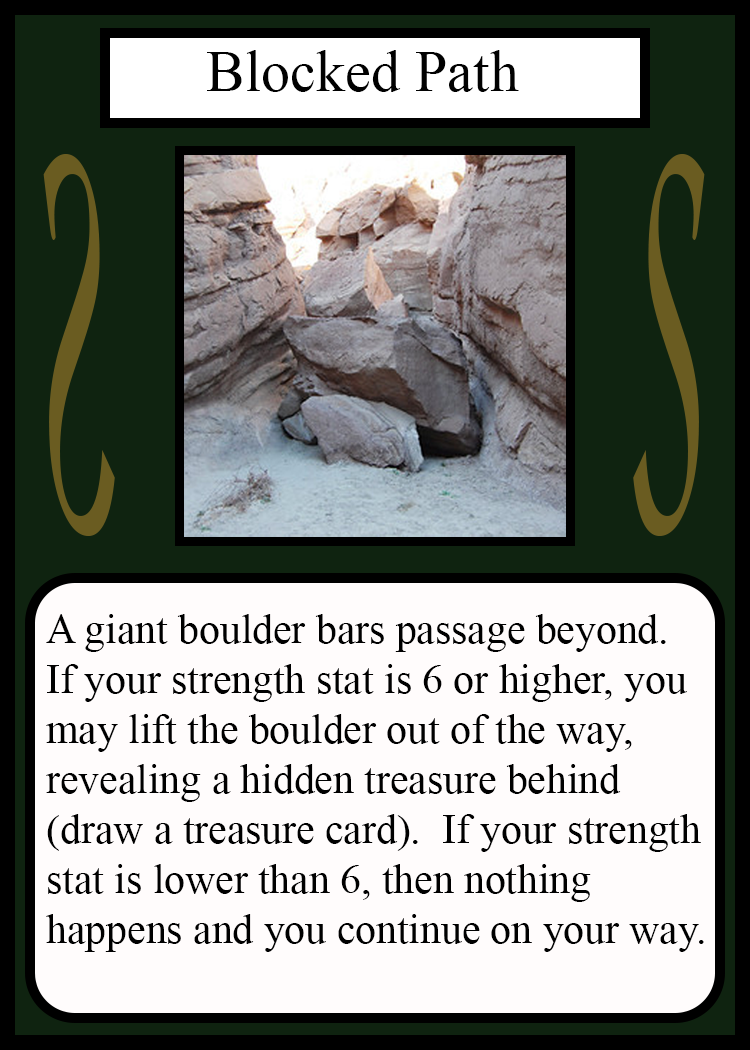
<style>
.page{position:relative;width:750px;height:1050px;background:#fffcfc}
.page>*{position:absolute;margin:0}
.t1{font:58.3px "TimesNewRomanPSMT";color:#010101}
.t2{font:548.5px "Apple-Chancery";color:#6a5c21;scale:0.27 1}
.t3{font:548.2px "Apple-Chancery";color:#6a5c21;scale:0.27 1}
.t4{font:41.7px "TimesNewRomanPSMT";color:#000000}
</style>
<div class="page">
<p class="t1" style="left:207px;top:50px;width:312px;height:42px">Blocked Path</p>
<p class="t2" style="left:43px;top:154px;width:72px;height:382px;rotate:180deg">S</p>
<p class="t3" style="left:633px;top:154px;width:72px;height:382px">S</p>
<p class="t4" style="left:46px;top:614px;width:658px;height:338px">A giant boulder bars passage beyond.<br>If your strength stat is 6 or higher, you<br>may lift the boulder out of the way,<br>revealing a hidden treasure behind <br>(draw a treasure card).  If your strength<br>stat is lower than 6, then nothing<br>happens and you continue on your way.</p>
</div>
